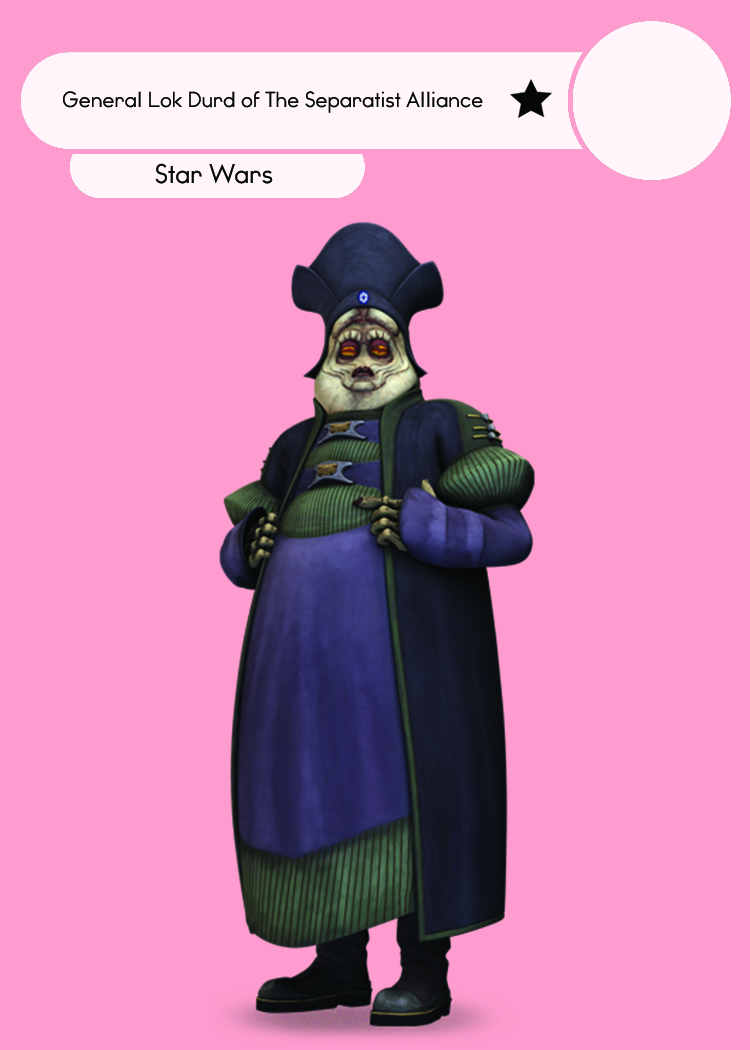
<style>
.page{position:relative;width:750px;height:1050px;background:#ff9ccf}
.page>*{position:absolute;margin:0}
.t1{font:20.8px "WatchwordRegularDemo";color:#060808}
.t2{font:25.5px "WatchwordRegularDemo";color:#060808}
</style>
<div class="page">
<p class="t1" style="left:63px;top:91px;width:420px;height:22px">General Lok Durd of The Separatist Alliance</p>
<p class="t2" style="left:155px;top:163px;width:118px;height:21px">Star Wars</p>
</div>
